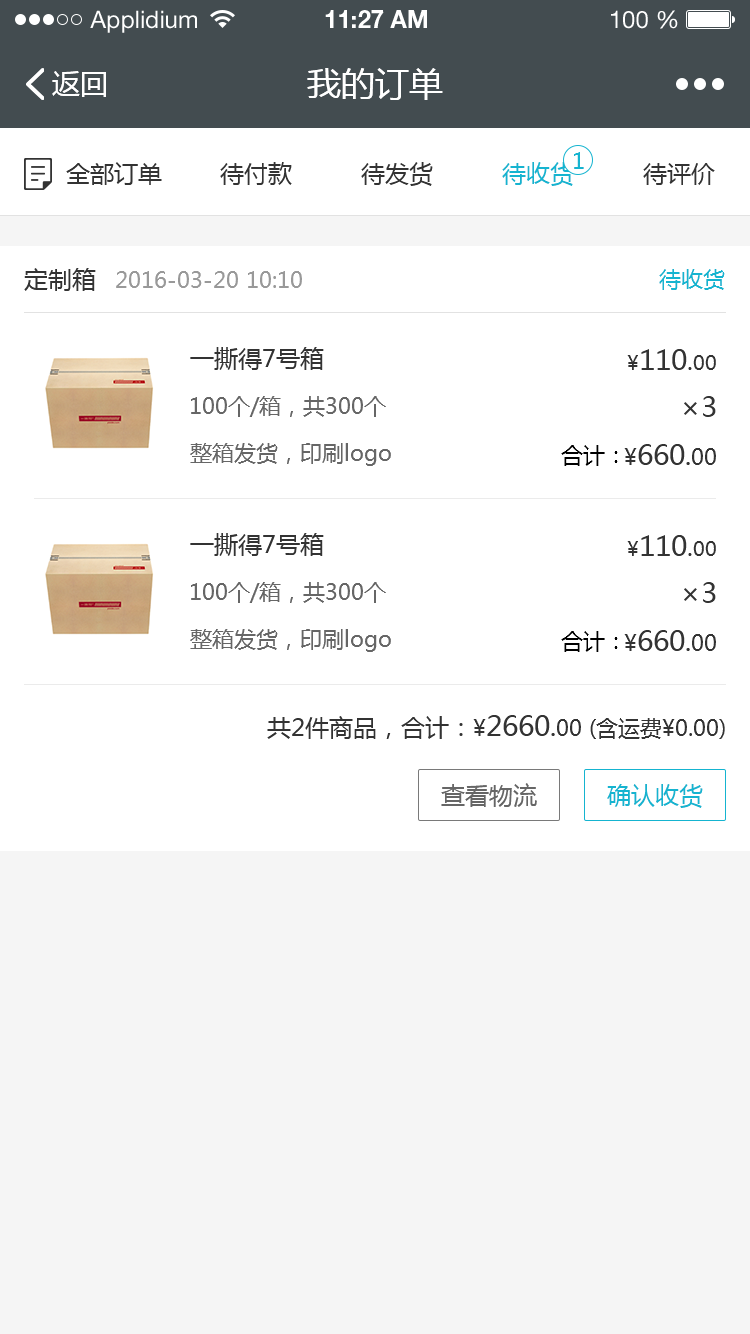
<style>
.page{position:relative;width:750px;height:1334px;background:#ffffff}
.page>*{position:absolute;margin:0}
.t1{font:24px "HelveticaNeueLTStd-Roman";color:#ffffff}
.t2{font:24px "HelveticaNeueLTStd-Bd";color:#ffffff}
.t3{font:28px "MicrosoftYaHei";color:#ffffff}
.t4{font:34px "MicrosoftYaHei";color:#ffffff}
.t5{font:22px "MicrosoftYaHei";color:#15b4d0}
.t6{font:24px "MicrosoftYaHei";color:#333333}
.t7{font:24px "MicrosoftYaHei";color:#15b4d0}
.t8{font:22px "MicrosoftYaHei";color:#999999}
.t9{font:28px "MicrosoftYaHei";color:#333333}
.t10{font:20px "MicrosoftYaHei";color:#333333}
.t11{font:22px "MicrosoftYaHei";color:#666666}
.t12{font:22px "MicrosoftYaHei";color:#000000}
.t13{font:22px "MicrosoftYaHei";color:#333333}
.t14{font:26px "MicrosoftYaHei";color:#333333}
.t15{font:24px "MicrosoftYaHei";color:#666666}
</style>
<div class="page">
<p class="t1" style="left:90px;top:10px;width:107px;height:23px">Applidium</p>
<p class="t2" style="left:325px;top:10px;width:102px;height:18px">11:27 AM</p>
<p class="t1" style="left:611px;top:10px;width:67px;height:19px">100 %</p>
<p class="t3" style="left:52px;top:71px;width:54px;height:26px">返回</p>
<p class="t4" style="left:307px;top:68px;width:136px;height:32px">我的订单</p>
<p class="t5" style="left:574px;top:152px;width:10px;height:17px">1</p>
<p class="t6" style="left:66px;top:162px;width:96px;height:23px">全部订单</p>
<p class="t6" style="left:220px;top:162px;width:72px;height:23px">待付款</p>
<p class="t6" style="left:361px;top:162px;width:72px;height:24px">待发货</p>
<p class="t7" style="left:502px;top:162px;width:72px;height:24px">待收货</p>
<p class="t6" style="left:643px;top:163px;width:72px;height:22px">待评价</p>
<p class="t6" style="left:24px;top:268px;width:72px;height:23px">定制箱</p>
<p class="t5" style="left:659px;top:269px;width:66px;height:21px">待收货</p>
<p class="t8" style="left:116px;top:271px;width:186px;height:17px">2016-03-20 10:10</p>
<p class="t6" style="left:190px;top:347px;width:134px;height:23px">一撕得7号箱</p>
<p class="t9" style="left:627px;top:349px;width:89px;height:21px"><span class="t10">¥</span>110<span class="t6">.</span><span class="t10">00</span></p>
<p class="t11" style="left:191px;top:396px;width:195px;height:21px">100个/箱，共300个</p>
<p class="t9" style="left:684px;top:396px;width:32px;height:21px">×3</p>
<p class="t11" style="left:190px;top:443px;width:201px;height:23px">整箱发货，印刷logo</p>
<p class="t12" style="left:561px;top:445px;width:57px;height:21px">合计：</p>
<p class="t9" style="left:624px;top:444px;width:92px;height:21px"><span class="t13">¥</span>660<span class="t14">.</span><span class="t13">00</span></p>
<p class="t6" style="left:190px;top:533px;width:134px;height:23px">一撕得7号箱</p>
<p class="t9" style="left:627px;top:535px;width:89px;height:21px"><span class="t10">¥</span>110<span class="t6">.</span><span class="t10">00</span></p>
<p class="t11" style="left:191px;top:582px;width:195px;height:21px">100个/箱，共300个</p>
<p class="t9" style="left:684px;top:582px;width:32px;height:21px">×3</p>
<p class="t11" style="left:190px;top:629px;width:201px;height:23px">整箱发货，印刷logo</p>
<p class="t9" style="left:624px;top:630px;width:92px;height:21px"><span class="t13">¥</span>660<span class="t14">.</span><span class="t13">00</span></p>
<p class="t12" style="left:561px;top:631px;width:57px;height:21px">合计：</p>
<p class="t13" style="left:267px;top:715px;width:458px;height:24px"><span class="t6">共2件商品，合计：</span>¥<span class="t9">2660</span><span class="t14">.</span>00 (含运费¥0.00)</p>
<p class="t15" style="left:441px;top:783px;width:96px;height:24px">查看物流</p>
<p class="t7" style="left:607px;top:784px;width:96px;height:24px">确认收货</p>
</div>
